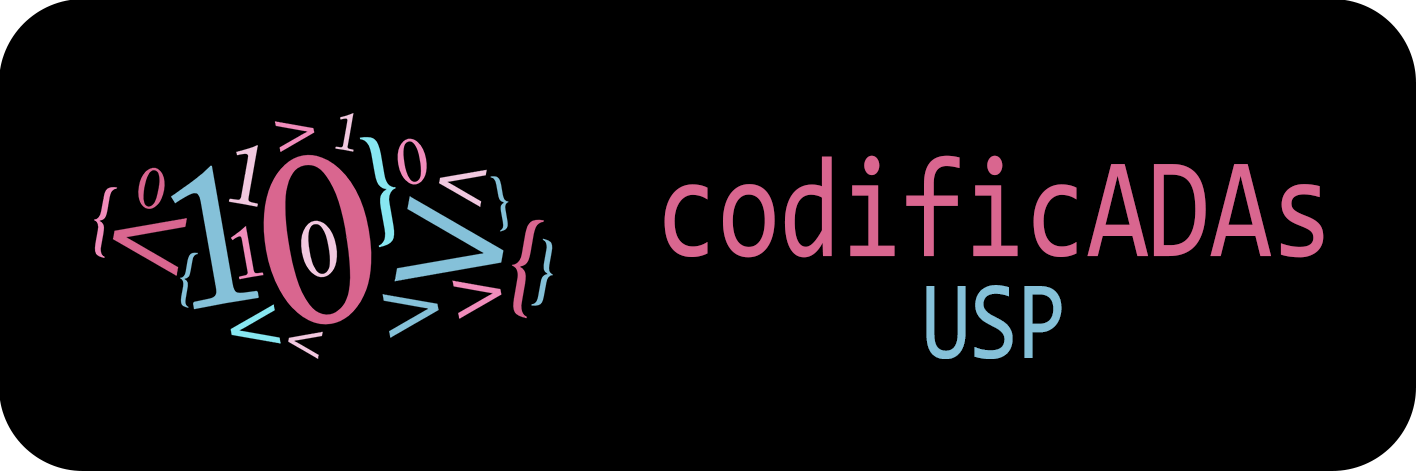
<style>
.page{position:relative;width:1417px;height:472px;background:#000000}
.page>*{position:absolute;margin:0}
.t1{font:144px "Consolas";color:#d96690;scale:0.78 1}
.t2{font:112.5px "Consolas";color:#86c2d9;scale:0.78 1}
</style>
<div class="page">
<p class="t1" style="left:664px;top:155px;width:660px;height:103px">codificADAs</p>
<p class="t2" style="left:926px;top:285px;width:136px;height:74px">USP</p>
</div>
